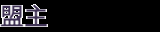
<style>
.page{position:relative;width:160px;height:32px;background:#000000}
.page>*{position:absolute;margin:0}
.t1{font:24px "WebPSD-18463539-0-Regular";color:#3f3254;font-weight:bold}
</style>
<div class="page">
<p class="t1" style="left:0px;top:0px;width:160px;height:32px">盟主</p>
</div>
